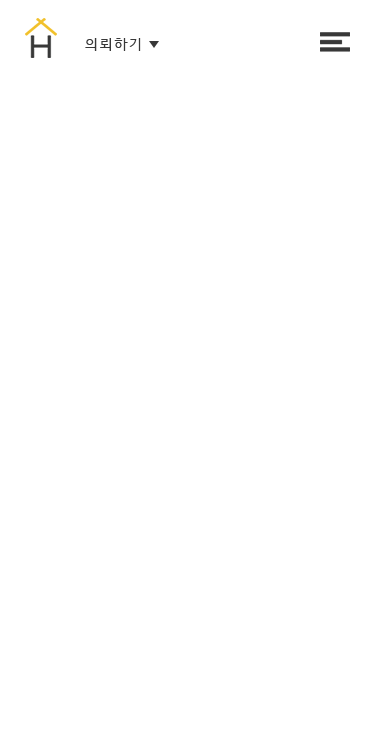
<style>
.page{position:relative;width:375px;height:750px;background:#ffffff}
.page>*{position:absolute;margin:0}
.t1{font:14px "HCRDotum";letter-spacing:0.1em;color:#383838}
</style>
<div class="page">
<p class="t1" style="left:85px;top:38px;width:56px;height:13px">의뢰하기</p>
</div>
